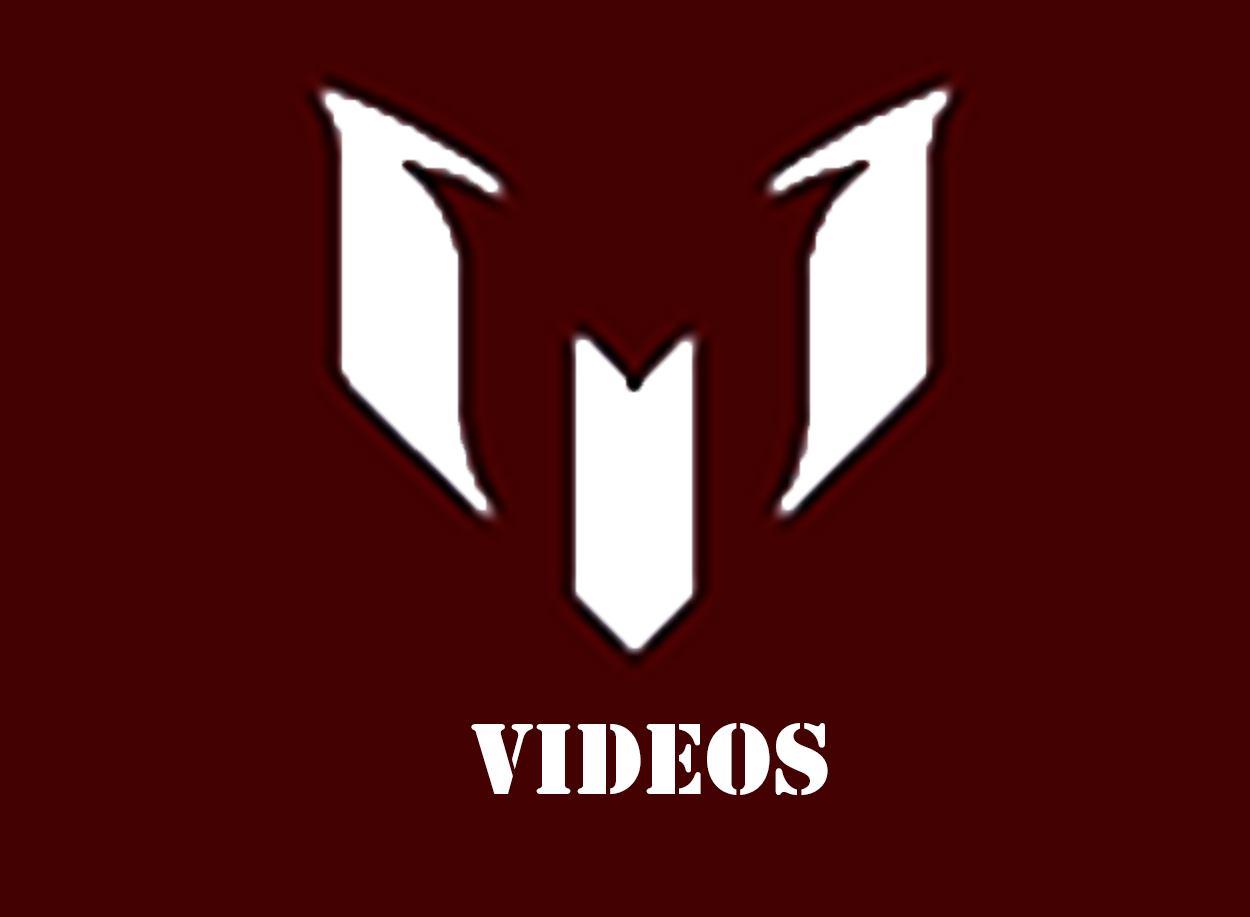
<style>
.page{position:relative;width:1250px;height:917px;background:#430101}
.page>*{position:absolute;margin:0}
.t1{font:93.9px "StencilStd";color:#ffffff}
</style>
<div class="page">
<p class="t1" style="left:471px;top:723px;width:357px;height:72px">Videos</p>
</div>
